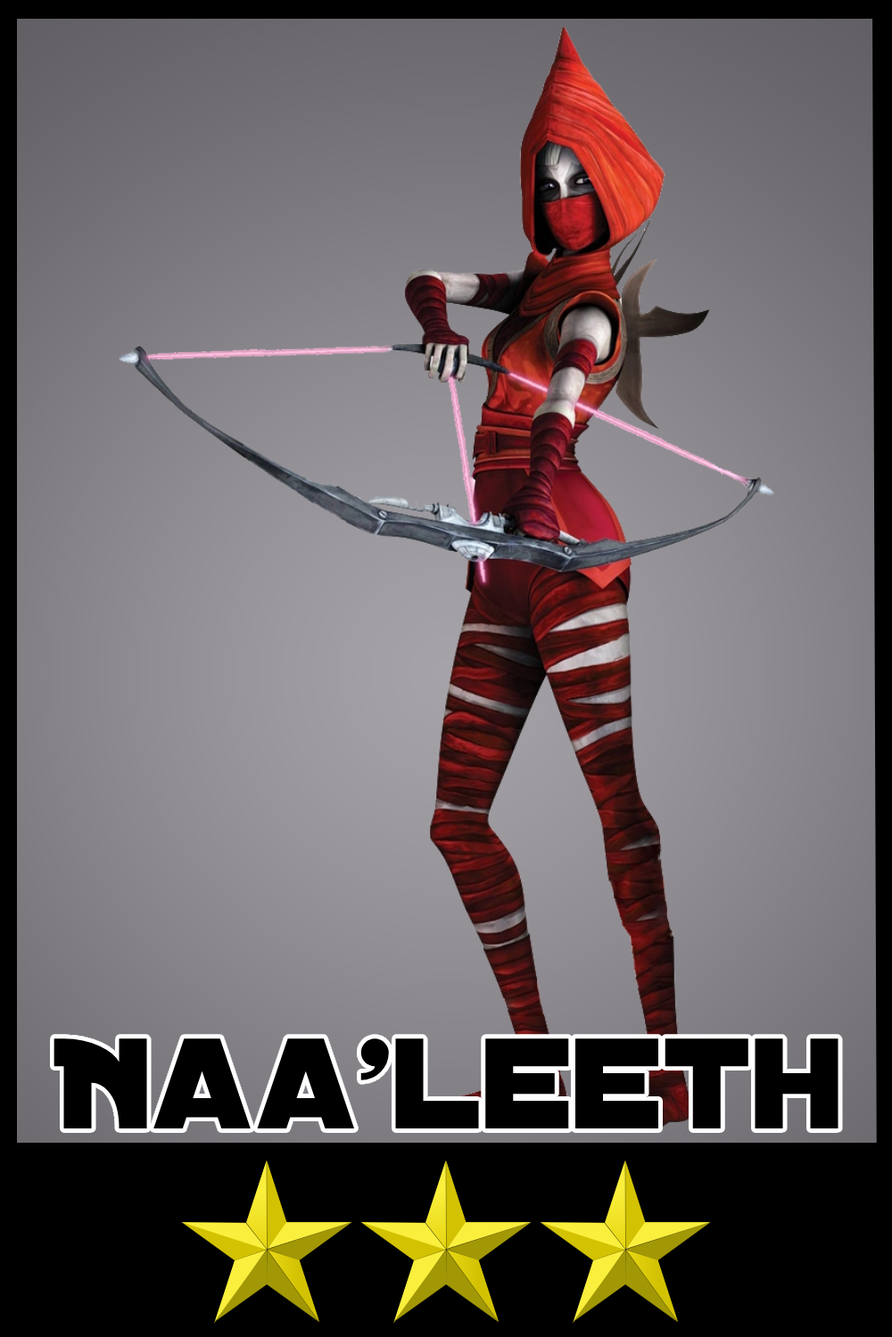
<style>
.page{position:relative;width:892px;height:1337px}
.page>*{position:absolute;margin:0}
.t1{font:138.2px "DistantGalaxy";color:#000000}
</style>
<div class="page">
<p class="t1" style="left:53px;top:1039px;width:785px;height:91px">Naa'leeth</p>
</div>
